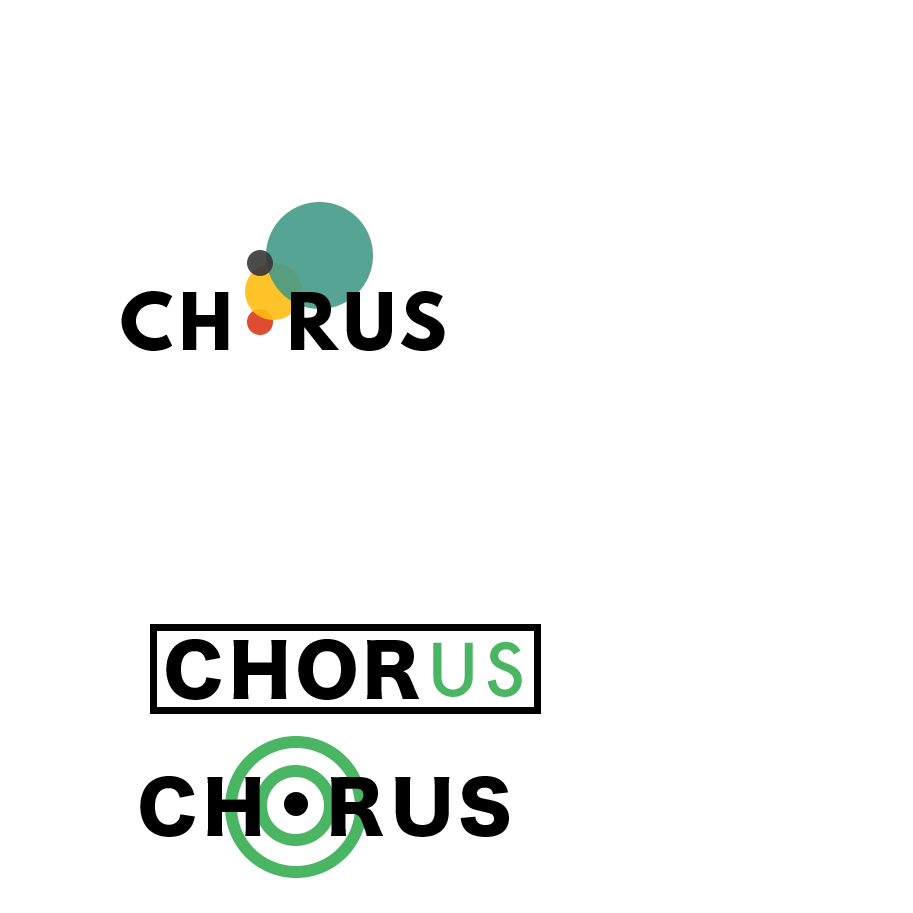
<style>
.page{position:relative;width:913px;height:913px;background:#ffffff}
.page>*{position:absolute;margin:0}
.t1{font:70.6px "LeagueSpartan-Bold";letter-spacing:0.075em;color:#000000}
.t2{font:70.6px "HiraKakuStdN-W8";letter-spacing:0.075em;color:#000000}
.t3{font:70.6px "Futura-Medium";letter-spacing:0.075em;color:#4ab563}
</style>
<div class="page">
<p class="t1" style="left:121px;top:291px;width:324px;height:60px">CH  RUS</p>
<p class="t2" style="left:166px;top:639px;width:254px;height:61px">CHOR</p>
<p class="t3" style="left:433px;top:641px;width:89px;height:56px">US</p>
<p class="t2" style="left:140px;top:776px;width:369px;height:61px">CH  RUS</p>
</div>
